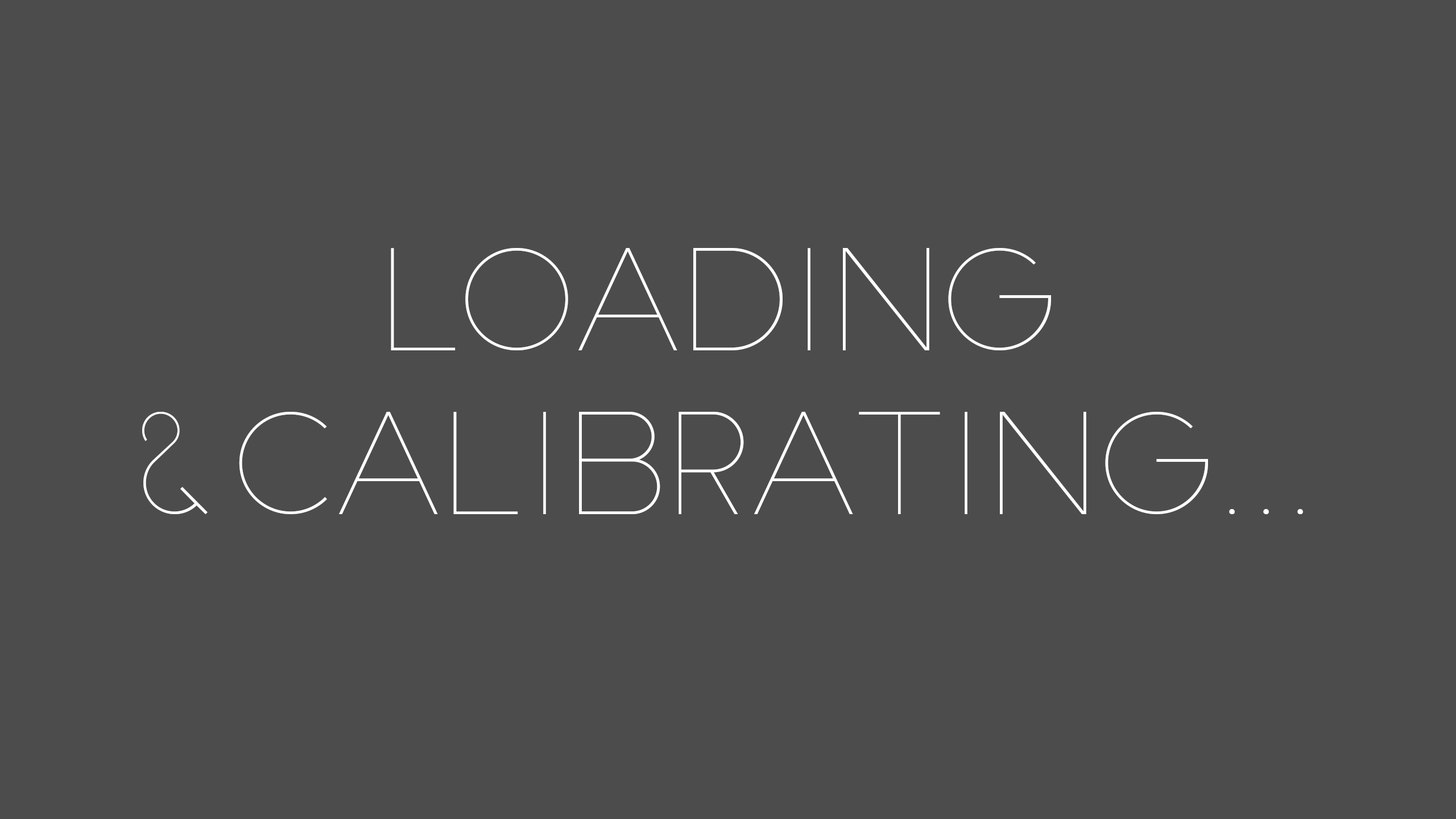
<style>
.page{position:relative;width:1456px;height:819px;background:#4c4c4c}
.page>*{position:absolute;margin:0}
.t1{font:136.5px "SlimJoe";color:#ffffff}
</style>
<div class="page">
<p class="t1" style="left:142px;top:248px;width:1161px;height:267px;text-align:center">Loading <br>&amp;calibrating...</p>
</div>
